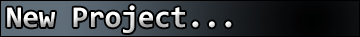
<style>
.page{position:relative;width:360px;height:37px}
.page>*{position:absolute;margin:0}
.t1{font:30px "Consolas-Bold"}
</style>
<div class="page">
<p class="t1" style="left:7px;top:5px;width:225px;height:28px">New Project...</p>
</div>
